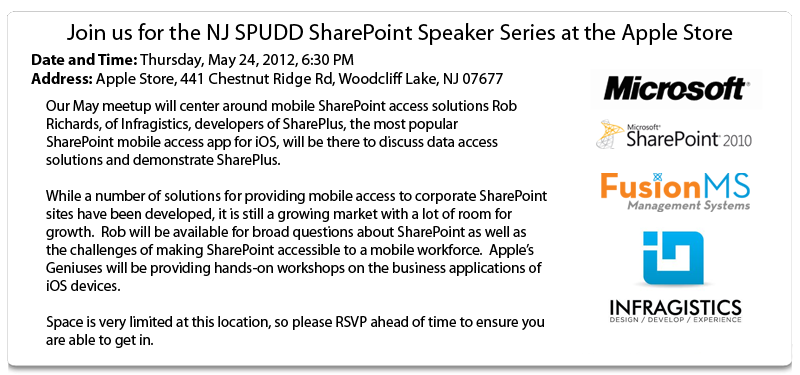
<style>
.page{position:relative;width:800px;height:375px;background:#ffffff}
.page>*{position:absolute;margin:0}
.t1{font:23px "MyriadPro-Regular";color:#000000}
.t2{font:16px "MyriadPro-Regular";color:#000000}
.t3{font:16px "MyriadPro-Bold";color:#000000}
.t4{font:15px "MyriadPro-Regular";color:#000000}
</style>
<div class="page">
<p class="t1" style="left:67px;top:23px;width:666px;height:22px">Join us for the NJ SPUDD SharePoint Speaker Series at the Apple Store</p>
<p class="t2" style="left:31px;top:53px;width:472px;height:34px"><span class="t3">Date and Time: </span>Thursday, May 24, 2012, 6:30 PM<br><span class="t3">Address: </span>Apple Store, 441 Chestnut Ridge Rd, Woodcliff Lake, NJ 07677</p>
<p class="t4" style="left:46px;top:100px;width:501px;height:248px">Our May meetup will center around mobile SharePoint access solutions Rob <br>Richards, of Infragistics, developers of SharePlus, the most popular <br>SharePoint mobile access app for iOS, will be there to discuss data access<br>solutions and demonstrate SharePlus. <br><br>While a number of solutions for providing mobile access to corporate SharePoint <br>sites have been developed, it is still a growing market with a lot of room for <br>growth.  Rob will be available for broad questions about SharePoint as well as <br>the challenges of making SharePoint accessible to a mobile workforce.  Apple’s <br>Geniuses will be providing hands-on workshops on the business applications of <br>iOS devices.<br><br>Space is very limited at this location, so please RSVP ahead of time to ensure you <br>are able to get in.</p>
</div>
